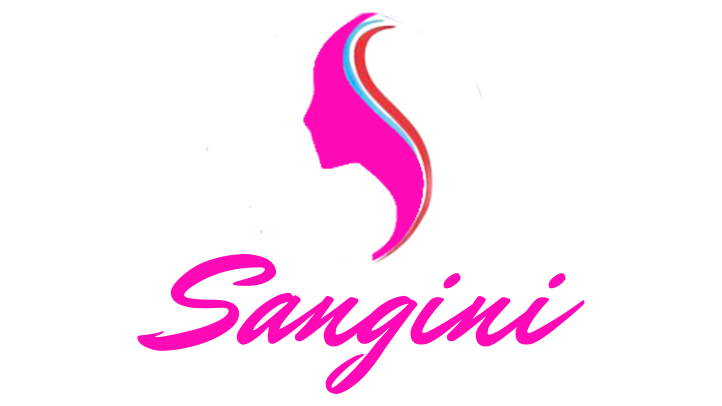
<style>
.page{position:relative;width:722px;height:406px;background:#ffffff}
.page>*{position:absolute;margin:0}
.t1{font:138.9px "MrDafoe-Regular";color:#ff0ab6}
</style>
<div class="page">
<p class="t1" style="left:137px;top:254px;width:448px;height:140px">Sangini</p>
</div>
